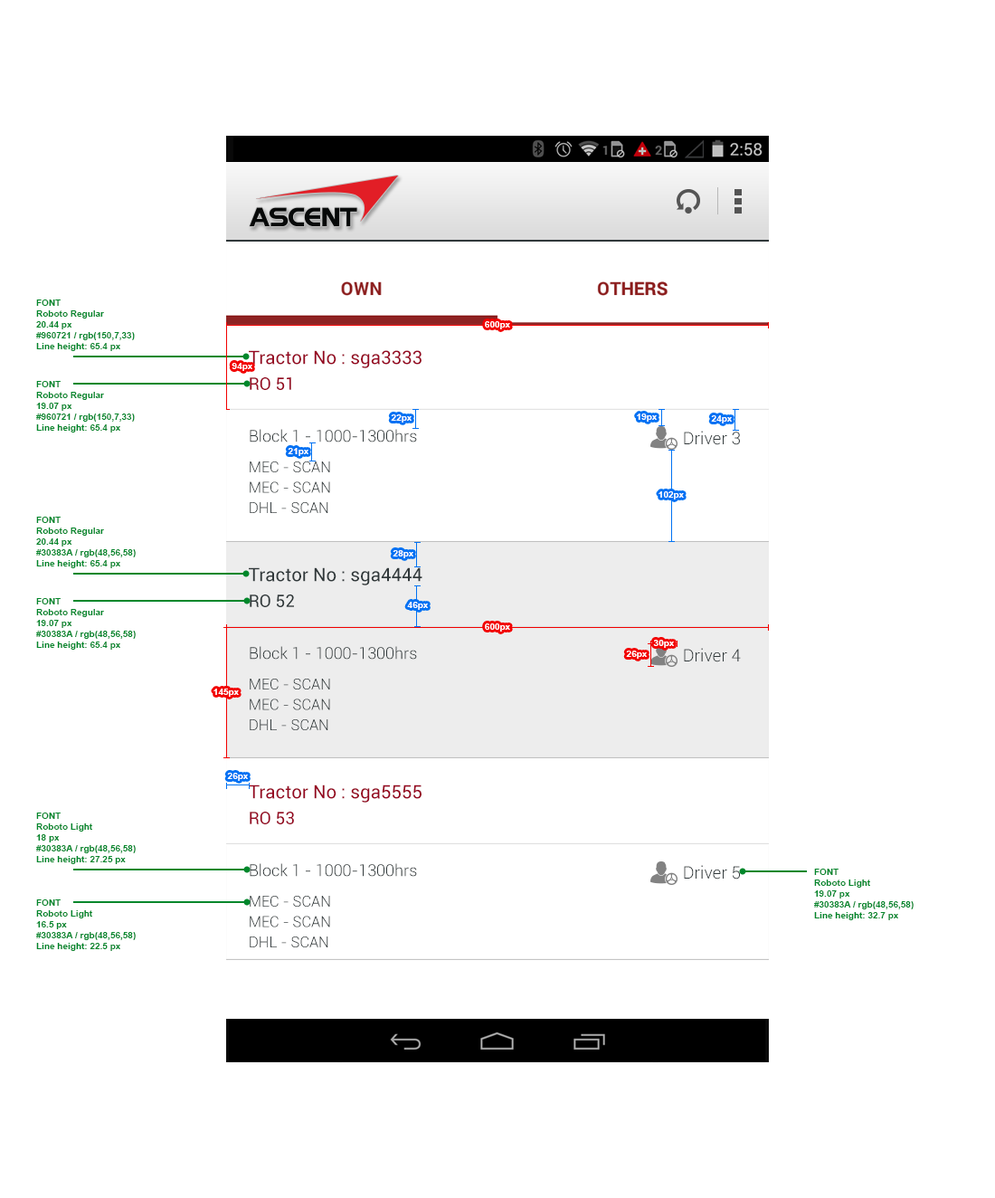
<style>
.page{position:relative;width:995px;height:1198px;background:#ffffff}
.page>*{position:absolute;margin:0}
.t1{font:9px "Arial-BoldMT";color:#00872b}
.t2{font:9px "Arial-BoldMT";color:#ffffff}
.t3{font:18.5px "Roboto-Regular";color:#960721}
.t4{font:17.3px "Roboto-Regular";color:#960721}
.t5{font:16.3px "Roboto-Light";color:#30383a}
.t6{font:17.3px "Roboto-Light";color:#30383a}
.t7{font:14.9px/20.4px "Roboto-Light";color:#30383a}
.t8{font:18.5px "Roboto-Regular";color:#30383a}
.t9{font:17.3px "Roboto-Regular";color:#30383a}
</style>
<div class="page">
<p class="t1" style="left:36px;top:300px;width:99px;height:51px">FONT <br>Roboto Regular<br>20.44 px<br>#960721 / rgb(150,7,33)<br>Line height: 65.4 px</p>
<p class="t2" style="left:485px;top:321px;width:25px;height:8px">600px</p>
<p class="t3" style="left:249px;top:350px;width:173px;height:18px">Tractor No : sga3333</p>
<p class="t2" style="left:232px;top:363px;width:20px;height:8px">94px</p>
<p class="t4" style="left:250px;top:377px;width:41px;height:13px">RO 51</p>
<p class="t1" style="left:36px;top:381px;width:99px;height:52px">FONT <br>Roboto Regular<br>19.07 px<br>#960721 / rgb(150,7,33)<br>Line height: 65.4 px</p>
<p class="t2" style="left:637px;top:414px;width:20px;height:8px">19px</p>
<p class="t2" style="left:391px;top:414px;width:21px;height:9px">22px</p>
<p class="t2" style="left:711px;top:415px;width:21px;height:8px">24px</p>
<p class="t5" style="left:250px;top:429px;width:167px;height:13px">Block 1 - 1000-1300hrs</p>
<p class="t6" style="left:684px;top:431px;width:56px;height:14px">Driver 3</p>
<p class="t2" style="left:288px;top:448px;width:21px;height:8px">21px</p>
<p class="t7" style="left:250px;top:461px;width:80px;height:52px">MEC - SCAN<br>MEC - SCAN<br>DHL - SCAN</p>
<p class="t2" style="left:659px;top:491px;width:25px;height:8px">102px</p>
<p class="t1" style="left:36px;top:517px;width:100px;height:51px">FONT <br>Roboto Regular<br>20.44 px<br>#30383A / rgb(48,56,58)<br>Line height: 65.4 px</p>
<p class="t2" style="left:393px;top:550px;width:21px;height:8px">28px</p>
<p class="t8" style="left:249px;top:567px;width:174px;height:18px">Tractor No : sga4444</p>
<p class="t1" style="left:36px;top:598px;width:100px;height:52px">FONT <br>Roboto Regular<br>19.07 px<br>#30383A / rgb(48,56,58)<br>Line height: 65.4 px</p>
<p class="t9" style="left:250px;top:594px;width:44px;height:13px">RO 52</p>
<p class="t2" style="left:407px;top:602px;width:21px;height:8px">46px</p>
<p class="t2" style="left:485px;top:623px;width:25px;height:9px">600px</p>
<p class="t2" style="left:653px;top:640px;width:21px;height:8px">30px</p>
<p class="t5" style="left:250px;top:646px;width:167px;height:14px">Block 1 - 1000-1300hrs</p>
<p class="t2" style="left:626px;top:651px;width:21px;height:8px">26px</p>
<p class="t6" style="left:684px;top:648px;width:57px;height:14px">Driver 4</p>
<p class="t2" style="left:214px;top:689px;width:25px;height:8px">145px</p>
<p class="t7" style="left:250px;top:679px;width:80px;height:51px">MEC - SCAN<br>MEC - SCAN<br>DHL - SCAN</p>
<p class="t2" style="left:227px;top:773px;width:21px;height:8px">26px</p>
<p class="t3" style="left:249px;top:785px;width:173px;height:18px">Tractor No : sga5555</p>
<p class="t1" style="left:36px;top:813px;width:100px;height:51px">FONT <br>Roboto Light<br>18 px<br>#30383A / rgb(48,56,58)<br>Line height: 27.25 px</p>
<p class="t4" style="left:250px;top:812px;width:44px;height:12px">RO 53</p>
<p class="t5" style="left:250px;top:863px;width:167px;height:14px">Block 1 - 1000-1300hrs</p>
<p class="t6" style="left:684px;top:865px;width:56px;height:15px">Driver 5</p>
<p class="t1" style="left:814px;top:869px;width:100px;height:51px">FONT <br>Roboto Light<br>19.07 px<br>#30383A / rgb(48,56,58)<br>Line height: 32.7 px</p>
<p class="t1" style="left:36px;top:899px;width:100px;height:52px">FONT <br>Roboto Light<br>16.5 px<br>#30383A / rgb(48,56,58)<br>Line height: 22.5 px</p>
<p class="t7" style="left:250px;top:896px;width:80px;height:51px">MEC - SCAN<br>MEC - SCAN<br>DHL - SCAN</p>
</div>
